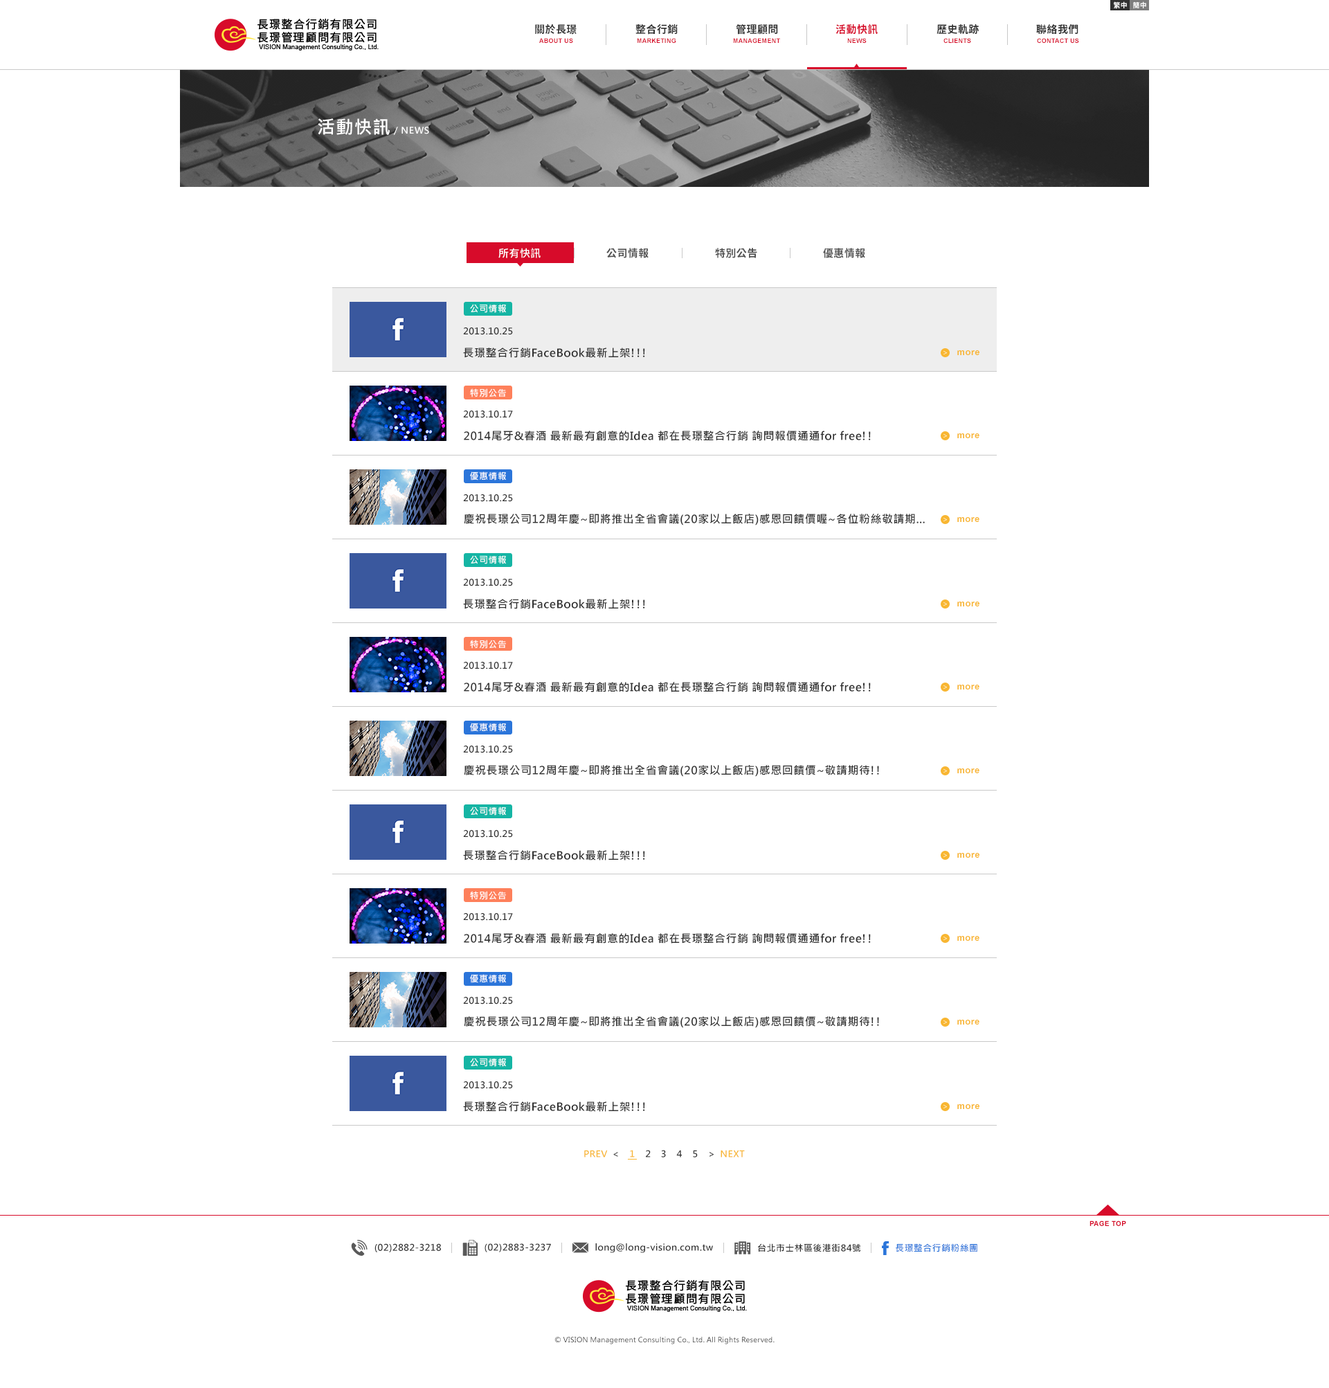
<style>
.page{position:relative;width:1329px;height:1388px;background:#ffffff}
.page>*{position:absolute;margin:0}
.t1{font:6.9px "NotoSansCJKtc-Bold";letter-spacing:0.03em;color:#ffffff}
.t2{font:10.4px "NotoSansCJKtc-Bold";letter-spacing:0.03em;color:#313131}
.t3{font:10.4px "NotoSansCJKtc-Bold";letter-spacing:0.03em;color:#d70b2a}
.t4{font:6.2px "Arial-BoldMT";letter-spacing:0.03em;color:#d70b2a;text-transform:uppercase}
.t5{font:9px "MicrosoftJhengHeiBold";letter-spacing:0.05em;color:#ffffff}
.t6{font:18px "MicrosoftJhengHeiBold";letter-spacing:0.03em;color:#ffffff}
.t7{font:10.5px "NotoSansCJKtc-Medium";letter-spacing:0.03em;color:#ffffff}
.t8{font:10.5px "NotoSansCJKtc-Bold";letter-spacing:0.03em}
.t9{font:10.5px "NotoSansCJKtc-Bold";letter-spacing:0.03em;color:#535353}
.t10{font:9px "MicrosoftJhengHeiBold";letter-spacing:0.03em;color:#ffffff}
.t11{font:9px "MicrosoftJhengHeiBold";letter-spacing:0.03em;color:#313131}
.t12{font:11.1px "MicrosoftJhengHeiBold";letter-spacing:0.03em;color:#313131}
.t13{font:9px "Arial-BoldMT";letter-spacing:0.03em;color:#f8b632}
.t14{font:9px "MicrosoftJhengHeiBold";letter-spacing:0.03em;color:#f8b632}
.t15{font:6.9px "Arial-BoldMT";letter-spacing:0.03em;color:#d70b2a}
.t16{font:9px "MicrosoftJhengHeiBold";letter-spacing:0.03em;color:#2b75da}
.t17{font:6.9px "MicrosoftJhengHeiRegular";letter-spacing:0.03em;color:#313131}
</style>
<div class="page">
<p class="t1" style="left:1113px;top:1px;width:14px;height:8px">繁中</p>
<p class="t1" style="left:1133px;top:1px;width:13px;height:8px">簡中</p>
<p class="t2" style="left:535px;top:24px;width:42px;height:11px">關於長璟</p>
<p class="t2" style="left:636px;top:24px;width:42px;height:11px">整合行銷</p>
<p class="t2" style="left:736px;top:24px;width:42px;height:11px">管理顧問</p>
<p class="t3" style="left:836px;top:24px;width:42px;height:11px">活動快訊</p>
<p class="t2" style="left:937px;top:24px;width:42px;height:11px">歷史軌跡</p>
<p class="t2" style="left:1036px;top:24px;width:43px;height:11px">聯絡我們</p>
<p class="t4" style="left:539px;top:38px;width:34px;height:5px">About Us</p>
<p class="t4" style="left:637px;top:38px;width:39px;height:5px">MARKETING</p>
<p class="t4" style="left:733px;top:38px;width:47px;height:5px">MANAGEMENT</p>
<p class="t4" style="left:847px;top:38px;width:20px;height:5px">NEWS</p>
<p class="t4" style="left:944px;top:38px;width:27px;height:5px">CLIENTS</p>
<p class="t4" style="left:1037px;top:38px;width:42px;height:5px">CONTACT US</p>
<p class="t5" style="left:318px;top:118px;width:111px;height:17px"><span class="t6">活動快訊</span> / NEWS</p>
<p class="t7" style="left:498px;top:248px;width:43px;height:10px">所有快訊</p>
<p class="t8" style="left:499px;top:248px;width:42px;height:10px">所有快訊</p>
<p class="t9" style="left:606px;top:248px;width:43px;height:10px">公司情報</p>
<p class="t9" style="left:715px;top:248px;width:42px;height:10px">特別公告</p>
<p class="t9" style="left:823px;top:248px;width:42px;height:10px">優惠情報</p>
<p class="t10" style="left:470px;top:304px;width:36px;height:9px">公司情報</p>
<p class="t11" style="left:463px;top:327px;width:50px;height:8px">2013.10.25</p>
<p class="t12" style="left:463px;top:348px;width:182px;height:10px">長璟整合行銷FaceBook最新上架!!!</p>
<p class="t13" style="left:957px;top:350px;width:23px;height:5px">more</p>
<p class="t10" style="left:470px;top:388px;width:36px;height:9px">特別公告</p>
<p class="t11" style="left:463px;top:411px;width:50px;height:7px">2013.10.17</p>
<p class="t12" style="left:464px;top:431px;width:407px;height:10px">2014尾牙&amp;春酒 最新最有創意的Idea 都在長璟整合行銷 詢問報價通通for free!!</p>
<p class="t13" style="left:957px;top:433px;width:23px;height:5px">more</p>
<p class="t10" style="left:470px;top:471px;width:36px;height:9px">優惠情報</p>
<p class="t11" style="left:463px;top:494px;width:50px;height:8px">2013.10.25</p>
<p class="t12" style="left:464px;top:514px;width:461px;height:11px">慶祝長璟公司12周年慶~即將推出全省會議(20家以上飯店)感恩回饋價喔~各位粉絲敬請期...</p>
<p class="t13" style="left:957px;top:517px;width:23px;height:5px">more</p>
<p class="t10" style="left:470px;top:555px;width:36px;height:9px">公司情報</p>
<p class="t11" style="left:463px;top:579px;width:50px;height:7px">2013.10.25</p>
<p class="t12" style="left:463px;top:599px;width:182px;height:10px">長璟整合行銷FaceBook最新上架!!!</p>
<p class="t13" style="left:957px;top:602px;width:23px;height:4px">more</p>
<p class="t10" style="left:470px;top:640px;width:36px;height:9px">特別公告</p>
<p class="t11" style="left:463px;top:662px;width:50px;height:7px">2013.10.17</p>
<p class="t12" style="left:464px;top:682px;width:407px;height:10px">2014尾牙&amp;春酒 最新最有創意的Idea 都在長璟整合行銷 詢問報價通通for free!!</p>
<p class="t13" style="left:957px;top:685px;width:23px;height:5px">more</p>
<p class="t10" style="left:470px;top:723px;width:36px;height:9px">優惠情報</p>
<p class="t11" style="left:463px;top:746px;width:50px;height:7px">2013.10.25</p>
<p class="t12" style="left:464px;top:765px;width:415px;height:12px">慶祝長璟公司12周年慶~即將推出全省會議(20家以上飯店)感恩回饋價~敬請期待!!</p>
<p class="t13" style="left:957px;top:768px;width:23px;height:5px">more</p>
<p class="t10" style="left:470px;top:807px;width:36px;height:9px">公司情報</p>
<p class="t11" style="left:463px;top:830px;width:50px;height:8px">2013.10.25</p>
<p class="t12" style="left:463px;top:850px;width:182px;height:11px">長璟整合行銷FaceBook最新上架!!!</p>
<p class="t13" style="left:957px;top:853px;width:23px;height:5px">more</p>
<p class="t10" style="left:470px;top:891px;width:36px;height:9px">特別公告</p>
<p class="t11" style="left:463px;top:913px;width:50px;height:8px">2013.10.17</p>
<p class="t12" style="left:464px;top:933px;width:407px;height:11px">2014尾牙&amp;春酒 最新最有創意的Idea 都在長璟整合行銷 詢問報價通通for free!!</p>
<p class="t13" style="left:957px;top:936px;width:23px;height:5px">more</p>
<p class="t10" style="left:470px;top:974px;width:36px;height:9px">優惠情報</p>
<p class="t11" style="left:463px;top:997px;width:50px;height:8px">2013.10.25</p>
<p class="t12" style="left:464px;top:1016px;width:415px;height:12px">慶祝長璟公司12周年慶~即將推出全省會議(20家以上飯店)感恩回饋價~敬請期待!!</p>
<p class="t13" style="left:957px;top:1020px;width:23px;height:5px">more</p>
<p class="t10" style="left:470px;top:1058px;width:36px;height:9px">公司情報</p>
<p class="t11" style="left:463px;top:1081px;width:50px;height:8px">2013.10.25</p>
<p class="t12" style="left:463px;top:1101px;width:182px;height:11px">長璟整合行銷FaceBook最新上架!!!</p>
<p class="t13" style="left:957px;top:1104px;width:23px;height:5px">more</p>
<p class="t11" style="left:584px;top:1150px;width:161px;height:8px"><span class="t14">PREV  </span>&lt;    <span class="t14">1    </span>2    3    4    5    &gt;  <span class="t14">NEXT</span></p>
<p class="t15" style="left:1090px;top:1221px;width:36px;height:5px">PAGE TOP</p>
<p class="t11" style="left:375px;top:1243px;width:66px;height:9px">(02)2882-3218</p>
<p class="t11" style="left:485px;top:1243px;width:66px;height:9px">(02)2883-3237</p>
<p class="t11" style="left:595px;top:1243px;width:118px;height:10px">long@long-vision.com.tw</p>
<p class="t11" style="left:758px;top:1243px;width:103px;height:9px">台北市士林區後港街84號</p>
<p class="t16" style="left:896px;top:1243px;width:82px;height:9px">長璟整合行銷粉絲團</p>
<p class="t17" style="left:555px;top:1337px;width:220px;height:7px">© VISION Management Consulting Co., Ltd. All Rights Reserved.</p>
</div>
